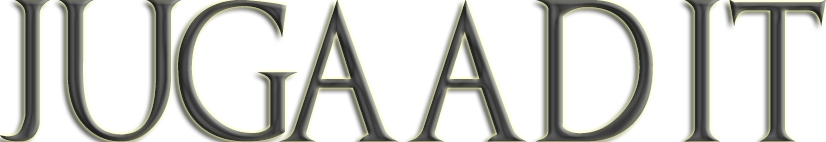
<style>
.page{position:relative;width:826px;height:142px;background:#ffffff}
.page>*{position:absolute;margin:0}
.t1{font:141.4px "GameofThrones";scale:0.87 1}
</style>
<div class="page">
<p class="t1" style="left:0px;top:0px;width:826px;height:142px">jugaad it</p>
</div>
